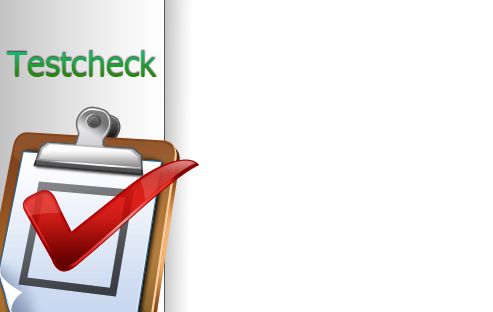
<style>
.page{position:relative;width:493px;height:312px;background:#ffffff}
.page>*{position:absolute;margin:0}
.t1{font:34px "Tahoma"}
</style>
<div class="page">
<p class="t1" style="left:7px;top:51px;width:150px;height:26px">Testcheck</p>
</div>
